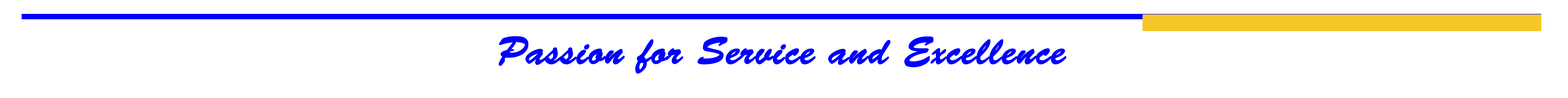
<style>
.page{position:relative;width:1568px;height:98px;background:#ffffff}
.page>*{position:absolute;margin:0}
.t1{font:38.9px "BrushScriptStd";color:#0100fe;font-weight:bold}
</style>
<div class="page">
<p class="t1" style="left:498px;top:36px;width:569px;height:38px">Passion for Service and Excellence</p>
</div>
